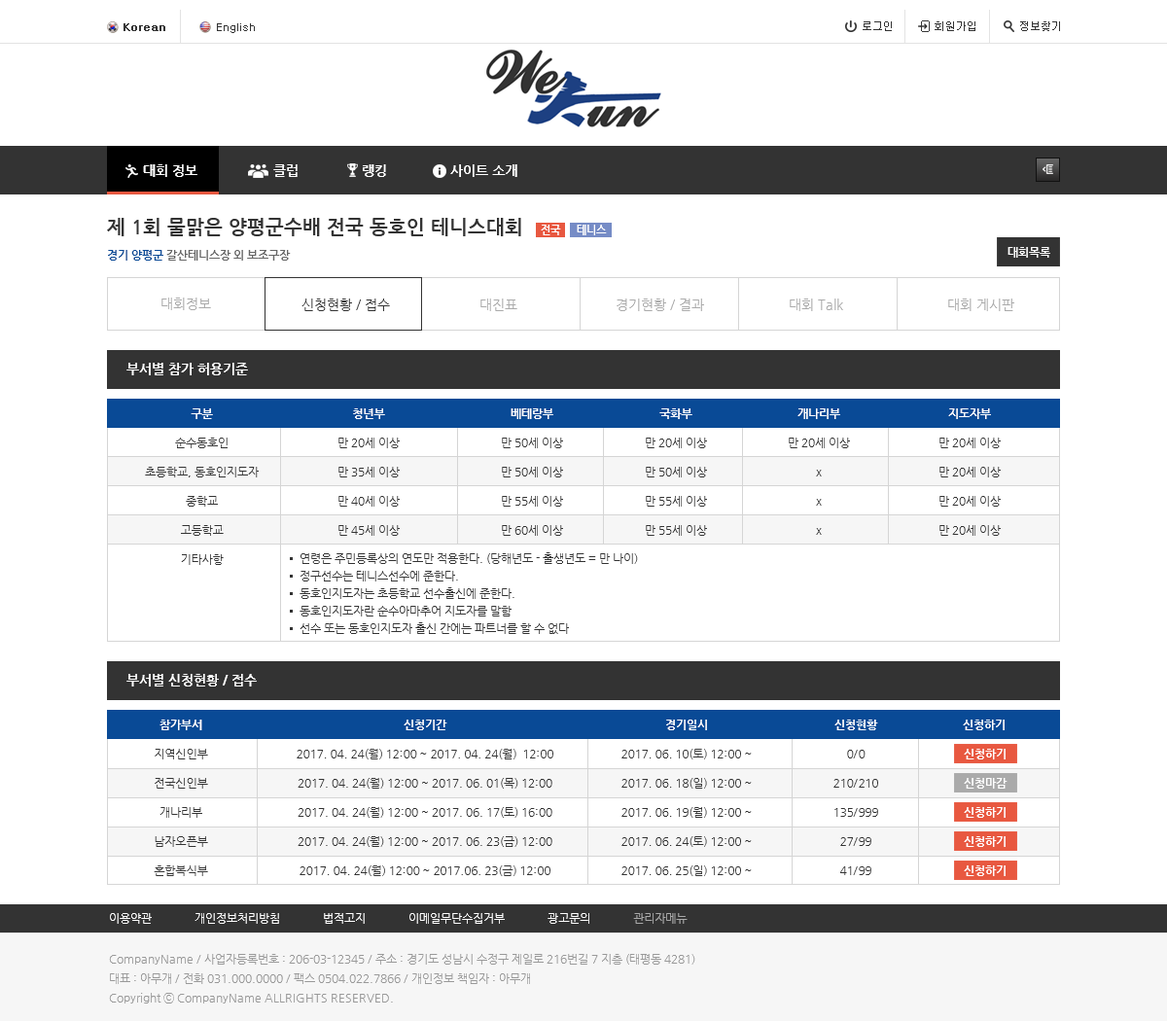
<style>
.page{position:relative;width:1167px;height:1021px;background:#ffffff}
.page>*{position:absolute;margin:0}
.t1{font:10.7px "Dotum";color:#333333;font-weight:bold}
.t2{font:10.7px "Dotum";color:#333333}
.t3{font:13.6px "NanumGothicBold";color:#ffffff}
.t4{font:19.5px "NanumGothicBold";color:#333333}
.t5{font:10.7px "NanumGothicBold";color:#ffffff}
.t6{font:11.7px "NanumGothicBold";color:#666666}
.t7{font:11.7px "NanumGothicBold";color:#094a96}
.t8{font:11.7px "NanumGothicBold";color:#ffffff}
.t9{font:13.6px "NanumGothic";color:#aaaaaa}
.t10{font:13.6px "NanumGothic";color:#333333}
.t11{font:11.7px/29.2px "NanumGothic";color:#333333}
.t12{font:11.7px/29.2px "NanumGothicBold";color:#ffffff}
.t13{font:11.7px/17.5px "NanumGothic";color:#333333}
.t14{font:11.7px "NanumGothic";color:#ffffff}
.t15{font:11.7px "NanumGothic";color:#aaaaaa}
.t16{font:11.7px/19.5px "NanumGothic";color:#999999}
</style>
<div class="page">
<p class="t1" style="left:124px;top:23px;width:41px;height:8px">Korean</p>
<p class="t2" style="left:217px;top:23px;width:38px;height:10px">English</p>
<p class="t2" style="left:863px;top:21px;width:29px;height:10px">로그인</p>
<p class="t2" style="left:935px;top:21px;width:41px;height:10px">회원가입</p>
<p class="t2" style="left:1020px;top:21px;width:40px;height:10px">정보찾기</p>
<p class="t3" style="left:143px;top:164px;width:375px;height:13px">대회 정보　　　　　　클럽　　　　　랭킹　　　　　사이트 소개</p>
<p class="t4" style="left:107px;top:218px;width:414px;height:18px">제 1회 물맑은 양평군수배 전국 동호인 테니스대회</p>
<p class="t5" style="left:541px;top:225px;width:20px;height:10px">전국</p>
<p class="t5" style="left:577px;top:225px;width:30px;height:10px">테니스</p>
<p class="t6" style="left:108px;top:250px;width:183px;height:11px"><span class="t7">경기 양평군</span> 갈산테니스장 외 보조구장</p>
<p class="t8" style="left:1008px;top:247px;width:43px;height:11px">대회목록</p>
<p class="t9" style="left:161px;top:298px;width:50px;height:12px">대회정보</p>
<p class="t10" style="left:302px;top:299px;width:88px;height:12px">신청현황 / 접수</p>
<p class="t9" style="left:481px;top:299px;width:37px;height:12px">대진표</p>
<p class="t9" style="left:617px;top:299px;width:87px;height:12px">경기현황 / 결과</p>
<p class="t9" style="left:790px;top:299px;width:53px;height:12px">대회 Talk</p>
<p class="t9" style="left:948px;top:299px;width:67px;height:12px">대회 게시판</p>
<p class="t3" style="left:126px;top:363px;width:122px;height:13px">부서별 참가 허용기준</p>
<p class="t11" style="left:145px;top:409px;width:114px;height:156px;text-align:center"><span class="t12">구분<br></span>순수동호인<br>초등학교, 동호인지도자<br>중학교<br>고등학교<br>기타사항</p>
<p class="t11" style="left:339px;top:409px;width:61px;height:127px;text-align:center"><span class="t12">청년부<br></span>만 20세 이상<br>만 35세 이상<br>만 40세 이상<br>만 45세 이상</p>
<p class="t11" style="left:502px;top:409px;width:61px;height:127px;text-align:center"><span class="t12">베테랑부<br></span>만 50세 이상<br>만 50세 이상<br>만 55세 이상<br>만 60세 이상</p>
<p class="t11" style="left:646px;top:409px;width:61px;height:127px;text-align:center"><span class="t12">국화부<br></span>만 20세 이상<br>만 50세 이상<br>만 55세 이상<br>만 55세 이상</p>
<p class="t11" style="left:789px;top:409px;width:61px;height:126px;text-align:center"><span class="t12">개나리부<br></span>만 20세 이상<br>x<br>x<br>x</p>
<p class="t11" style="left:940px;top:409px;width:61px;height:127px;text-align:center"><span class="t12">지도자부<br></span>만 20세 이상<br>만 20세 이상<br>만 20세 이상<br>만 20세 이상</p>
<p class="t13" style="left:300px;top:553px;width:338px;height:81px">연령은 주민등록상의 연도만 적용한다. (당해년도 - 출생년도 = 만 나이)<br>정구선수는 테니스선수에 준한다.<br>동호인지도자는 초등학교 선수출신에 준한다.<br>동호인지도자란 순수아마추어 지도자를 말함<br>선수 또는 동호인지도자 출신 간에는 파트너를 할 수 없다</p>
<p class="t3" style="left:126px;top:674px;width:131px;height:13px">부서별 신청현황 / 접수</p>
<p class="t11" style="left:154px;top:720px;width:54px;height:157px;text-align:center"><span class="t12">참가부서<br></span>지역신인부<br>전국신인부<br>개나리부<br>남자오픈부<br>혼합복식부</p>
<p class="t11" style="left:297px;top:720px;width:257px;height:157px;text-align:center"><span class="t12">신청기간<br></span>2017. 04. 24(월) 12:00 ~ 2017. 04. 24(월)  12:00<br>2017. 04. 24(월) 12:00 ~ 2017. 06. 01(목) 12:00<br>2017. 04. 24(월) 12:00 ~ 2017. 06. 17(토) 16:00<br>2017. 04. 24(월) 12:00 ~ 2017. 06. 23(금) 12:00<br>2017. 04. 24(월) 12:00 ~ 2017.06. 23(금) 12:00</p>
<p class="t11" style="left:622px;top:720px;width:130px;height:157px;text-align:center"><span class="t12">경기일시<br></span>2017. 06. 10(토) 12:00 ~<br>2017. 06. 18(일) 12:00 ~<br>2017. 06. 19(월) 12:00 ~<br>2017. 06. 24(토) 12:00 ~<br>2017. 06. 25(일) 12:00 ~</p>
<p class="t11" style="left:834px;top:720px;width:44px;height:156px;text-align:center"><span class="t12">신청현황<br></span>0/0<br>210/210<br>135/999<br>27/99<br>41/99</p>
<p class="t8" style="left:963px;top:720px;width:42px;height:11px">신청하기</p>
<p class="t8" style="left:964px;top:749px;width:42px;height:11px">신청하기</p>
<p class="t8" style="left:964px;top:778px;width:44px;height:11px">신청마감</p>
<p class="t8" style="left:964px;top:807px;width:42px;height:11px">신청하기</p>
<p class="t8" style="left:964px;top:837px;width:42px;height:10px">신청하기</p>
<p class="t8" style="left:964px;top:866px;width:42px;height:11px">신청하기</p>
<p class="t14" style="left:110px;top:913px;width:578px;height:11px">이용약관　　　　개인정보처리방침　　　　법적고지　　　　이메일무단수집거부　　　　광고문의　　　　<span class="t15">관리자메뉴</span></p>
<p class="t16" style="left:109px;top:954px;width:587px;height:50px">CompanyName / 사업자등록번호 : 206-03-12345 / 주소 : 경기도 성남시 수정구 제일로 216번길 7 지층 (태평동 4281)<br>대표 : 아무개 / 전화 031.000.0000 / 팩스 0504.022.7866 / 개인정보 책임자 : 아무개<br>Copyright ⓒ CompanyName ALLRIGHTS RESERVED.</p>
</div>
